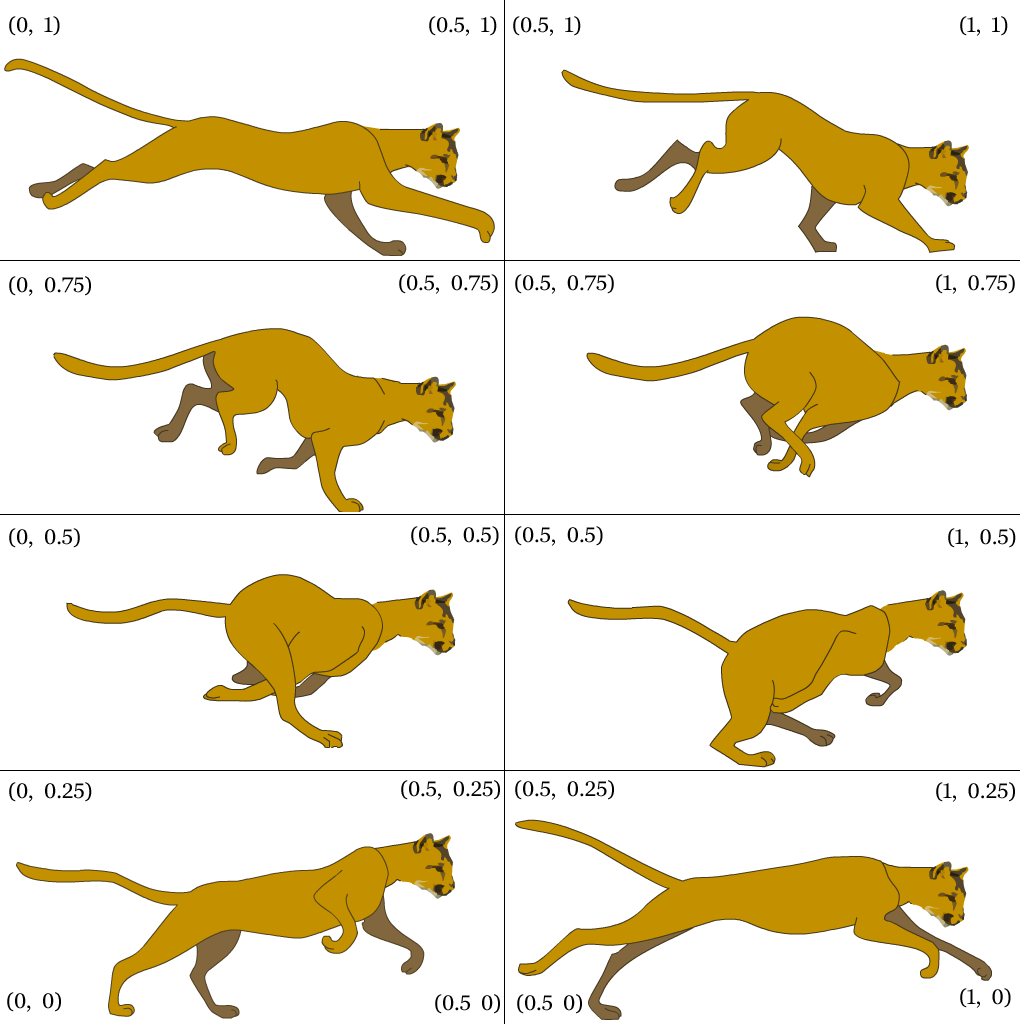
<style>
.page{position:relative;width:1024px;height:1024px;background:#ffffff}
.page>*{position:absolute;margin:0}
.t1{font:21px "Georgia";color:#000000}
</style>
<div class="page">
<p class="t1" style="left:9px;top:16px;width:51px;height:20px">(0,  1)</p>
<p class="t1" style="left:429px;top:16px;width:68px;height:20px">(0.5,  1)</p>
<p class="t1" style="left:513px;top:16px;width:68px;height:20px">(0.5,  1)</p>
<p class="t1" style="left:960px;top:16px;width:48px;height:20px">(1,  1)</p>
<p class="t1" style="left:9px;top:276px;width:82px;height:20px">(0,  0.75)</p>
<p class="t1" style="left:399px;top:274px;width:99px;height:20px">(0.5,  0.75)</p>
<p class="t1" style="left:515px;top:274px;width:99px;height:20px">(0.5,  0.75)</p>
<p class="t1" style="left:936px;top:274px;width:79px;height:20px">(1,  0.75)</p>
<p class="t1" style="left:9px;top:528px;width:71px;height:20px">(0,  0.5)</p>
<p class="t1" style="left:411px;top:526px;width:88px;height:20px">(0.5,  0.5)</p>
<p class="t1" style="left:515px;top:526px;width:88px;height:20px">(0.5,  0.5)</p>
<p class="t1" style="left:948px;top:528px;width:68px;height:20px">(1,  0.5)</p>
<p class="t1" style="left:9px;top:782px;width:83px;height:20px">(0,  0.25)</p>
<p class="t1" style="left:401px;top:780px;width:99px;height:20px">(0.5,  0.25)</p>
<p class="t1" style="left:515px;top:780px;width:99px;height:20px">(0.5,  0.25)</p>
<p class="t1" style="left:936px;top:782px;width:79px;height:20px">(1,  0.25)</p>
<p class="t1" style="left:960px;top:988px;width:51px;height:20px">(1,  0)</p>
<p class="t1" style="left:7px;top:992px;width:54px;height:20px">(0,  0)</p>
<p class="t1" style="left:435px;top:994px;width:65px;height:20px">(0.5  0)</p>
<p class="t1" style="left:517px;top:994px;width:65px;height:20px">(0.5  0)</p>
</div>
